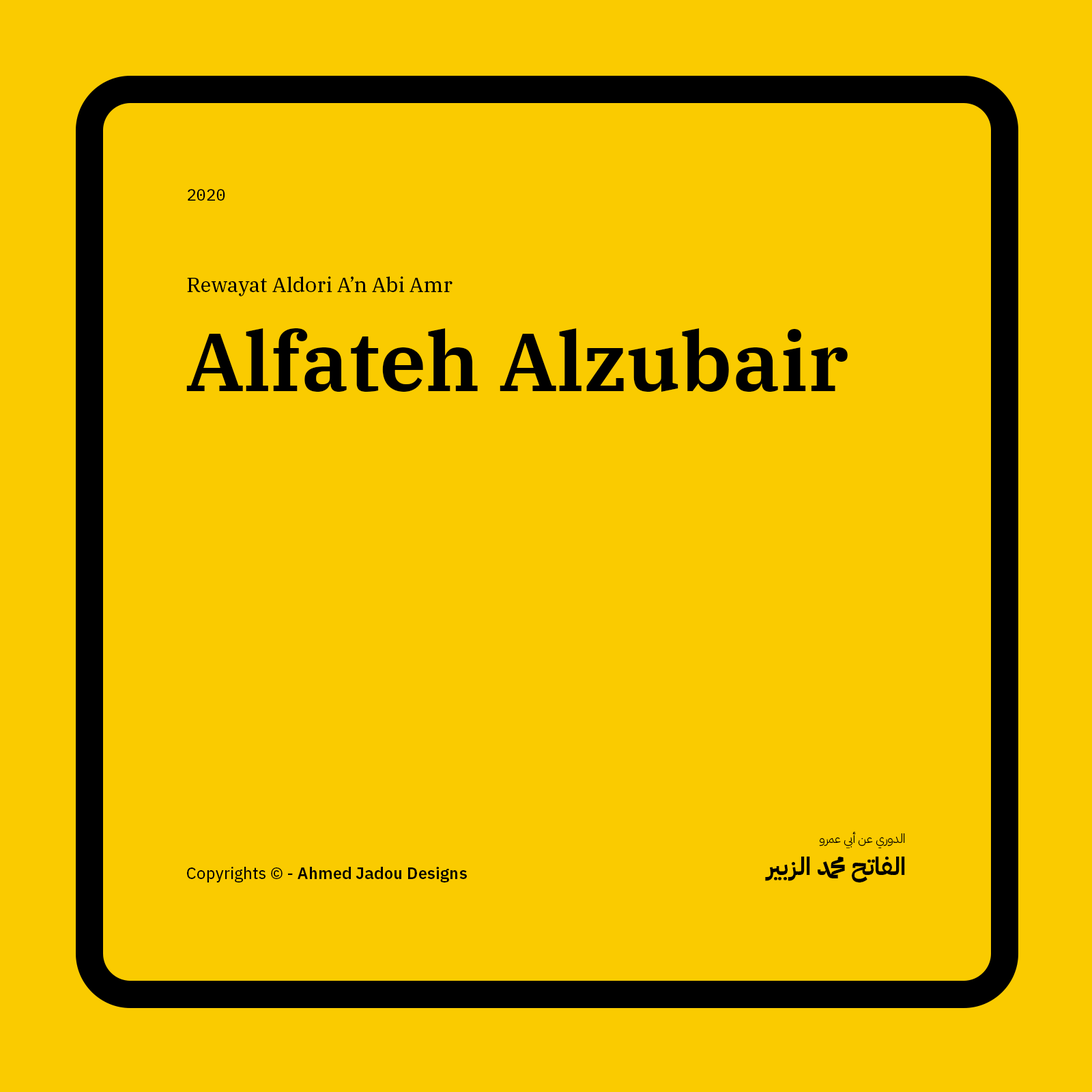
<style>
.page{position:relative;width:1092px;height:1092px;background:#facb00}
.page>*{position:absolute;margin:0}
.t1{font:16.4px "IBMPlexMono-Text";color:#000000}
.t2{font:20.5px "IBMPlexSerif-Text";color:#000000}
.t3{font:81.9px "IBMPlexSerif-SemiBold";color:#000000}
.t4{font:12.3px "IBMPlexArabic-Light";color:#000000}
.t5{font:24.6px "IBMPlexArabic-Bold";color:#000000}
.t6{font:16.4px "IBMPlexSans-SemiBold";color:#000000}
.t7{font:16.4px "IBMPlexSans-Text";color:#000000}
</style>
<div class="page">
<p class="t1" style="left:188px;top:189px;width:37px;height:12px">2020</p>
<p class="t2" style="left:187px;top:276px;width:265px;height:20px">Rewayat Aldori A’n Abi Amr</p>
<p class="t3" style="left:186px;top:328px;width:662px;height:64px">Alfateh Alzubair</p>
<p class="t4" style="left:819px;top:831px;width:86px;height:17px">الدوري عن أبي عمرو</p>
<p class="t5" style="left:765px;top:857px;width:140px;height:25px">الفاتح محمد الزبير</p>
<p class="t6" style="left:187px;top:867px;width:280px;height:15px"><span class="t7">Copyrights © - </span>Ahmed Jadou Designs</p>
</div>
